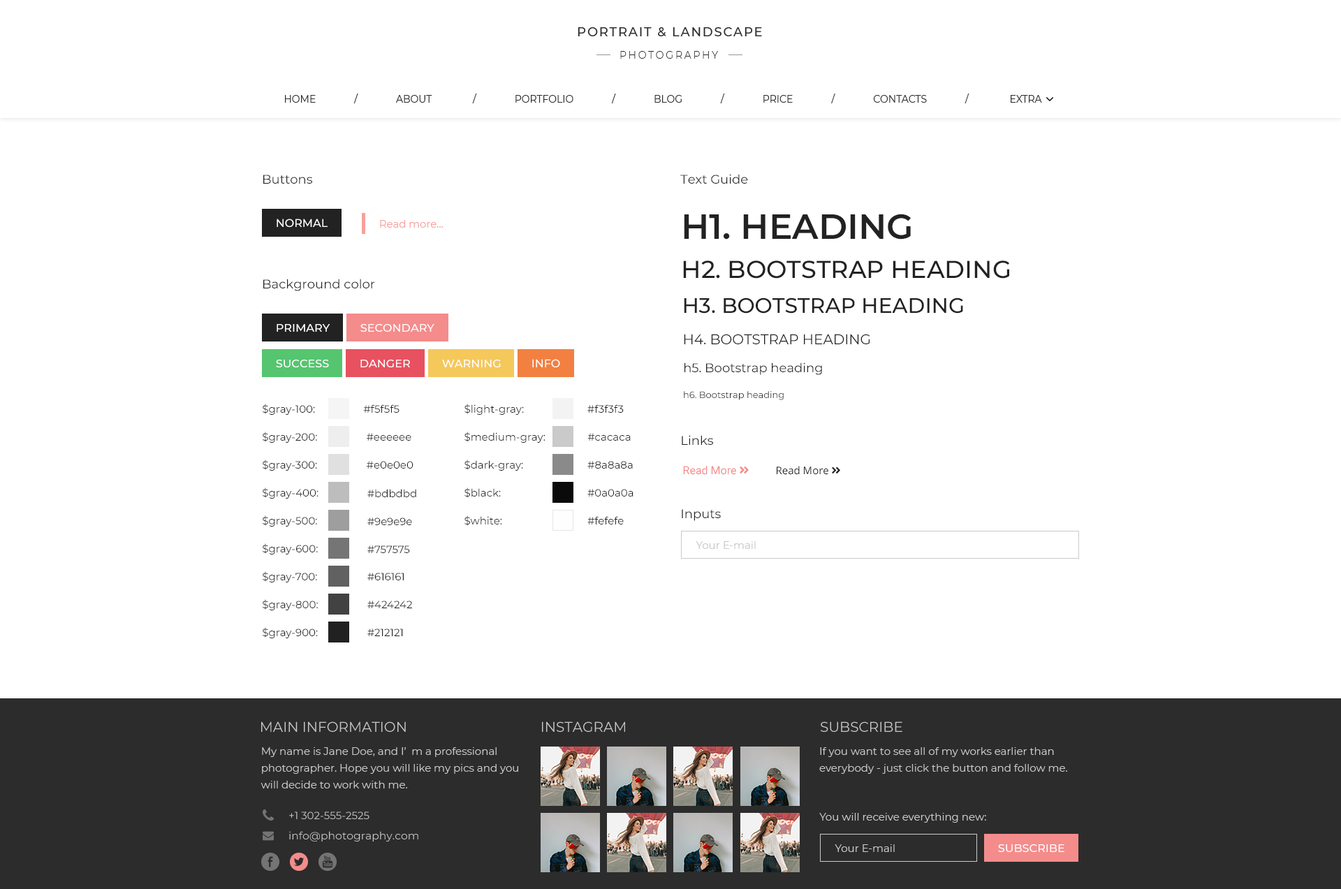
<style>
.page{position:relative;width:1341px;height:889px;background:#ffffff}
.page>*{position:absolute;margin:0}
.t1{font:12.6px "Montserrat-Regular";color:#222222}
.t2{font:11.2px "Montserrat-Medium";color:#ffffff;text-transform:uppercase}
.t3{font:10.5px "Montserrat-Regular";color:#f8a09d}
.t4{font:34.9px "Montserrat-SemiBold";color:#222222;text-transform:uppercase}
.t5{font:24.4px "Montserrat-Medium";color:#222222;text-transform:uppercase}
.t6{font:12.5px "Montserrat-Regular";color:#222222}
.t7{font:21px "Montserrat-Medium";color:#222222;text-transform:uppercase}
.t8{font:14px "Montserrat-Regular";color:#222222;text-transform:uppercase}
.t9{font:11.1px "Montserrat-Medium";color:#ffffff;text-transform:uppercase}
.t10{font:9.1px "Montserrat-Regular";color:#222222}
.t11{font:10.5px/27.9px "Montserrat-Regular";color:#222222}
.t12{font:10.5px "Montserrat-Regular";color:#222222}
.t13{font:10.5px "Montserrat-Regular";color:#cacaca}
</style>
<div class="page">
<p class="t1" style="left:680px;top:174px;width:68px;height:10px">Text Guide</p>
<p class="t1" style="left:263px;top:175px;width:49px;height:9px">Buttons</p>
<p class="t2" style="left:277px;top:219px;width:51px;height:9px">Normal</p>
<p class="t3" style="left:380px;top:220px;width:63px;height:8px">Read more...</p>
<p class="t4" style="left:684px;top:214px;width:228px;height:26px">h1. heading</p>
<p class="t5" style="left:683px;top:261px;width:327px;height:18px">h2. Bootstrap heading</p>
<p class="t6" style="left:263px;top:279px;width:112px;height:12px">Background color</p>
<p class="t7" style="left:684px;top:298px;width:279px;height:16px">h3. Bootstrap heading</p>
<p class="t2" style="left:277px;top:324px;width:53px;height:8px">Primary</p>
<p class="t2" style="left:360px;top:323px;width:74px;height:9px">Secondary</p>
<p class="t8" style="left:684px;top:334px;width:186px;height:10px">h4. Bootstrap heading</p>
<p class="t9" style="left:276px;top:359px;width:53px;height:9px">Success</p>
<p class="t2" style="left:360px;top:359px;width:50px;height:9px">Danger</p>
<p class="t2" style="left:442px;top:359px;width:59px;height:9px">Warning</p>
<p class="t2" style="left:532px;top:359px;width:28px;height:9px">Info</p>
<p class="t1" style="left:685px;top:363px;width:137px;height:12px">h5. Bootstrap heading</p>
<p class="t10" style="left:684px;top:391px;width:100px;height:9px">h6. Bootstrap heading</p>
<p class="t11" style="left:263px;top:404px;width:56px;height:234px;text-align:right">$gray-100: <br>$gray-200: <br>$gray-300: <br>$gray-400: <br>$gray-500: <br>$gray-600:<br>$gray-700:<br>$gray-800:<br>$gray-900:</p>
<p class="t12" style="left:363px;top:404px;width:37px;height:9px">#f5f5f5</p>
<p class="t11" style="left:464px;top:404px;width:82px;height:122px;text-align:right">$light-gray:<br>$medium-gray:<br>$dark-gray:<br>$black:<br>$white:</p>
<p class="t12" style="left:587px;top:404px;width:37px;height:9px">#f3f3f3</p>
<p class="t12" style="left:367px;top:433px;width:44px;height:8px">#eeeeee</p>
<p class="t12" style="left:587px;top:433px;width:44px;height:8px">#cacaca</p>
<p class="t1" style="left:682px;top:435px;width:31px;height:10px">Links</p>
<p class="t12" style="left:367px;top:461px;width:46px;height:8px">#e0e0e0</p>
<p class="t12" style="left:587px;top:461px;width:46px;height:8px">#8a8a8a</p>
<p class="t12" style="left:367px;top:489px;width:49px;height:8px">#bdbdbd</p>
<p class="t12" style="left:587px;top:489px;width:47px;height:8px">#0a0a0a</p>
<p class="t1" style="left:682px;top:509px;width:39px;height:12px">Inputs</p>
<p class="t12" style="left:367px;top:518px;width:45px;height:7px">#9e9e9e</p>
<p class="t12" style="left:587px;top:516px;width:37px;height:9px">#fefefe</p>
<p class="t12" style="left:367px;top:546px;width:43px;height:7px">#757575</p>
<p class="t13" style="left:696px;top:541px;width:60px;height:8px">Your E-mail</p>
<p class="t12" style="left:367px;top:573px;width:37px;height:7px">#616161</p>
<p class="t12" style="left:367px;top:601px;width:45px;height:7px">#424242</p>
<p class="t12" style="left:367px;top:629px;width:36px;height:7px">#212121</p>
</div>
